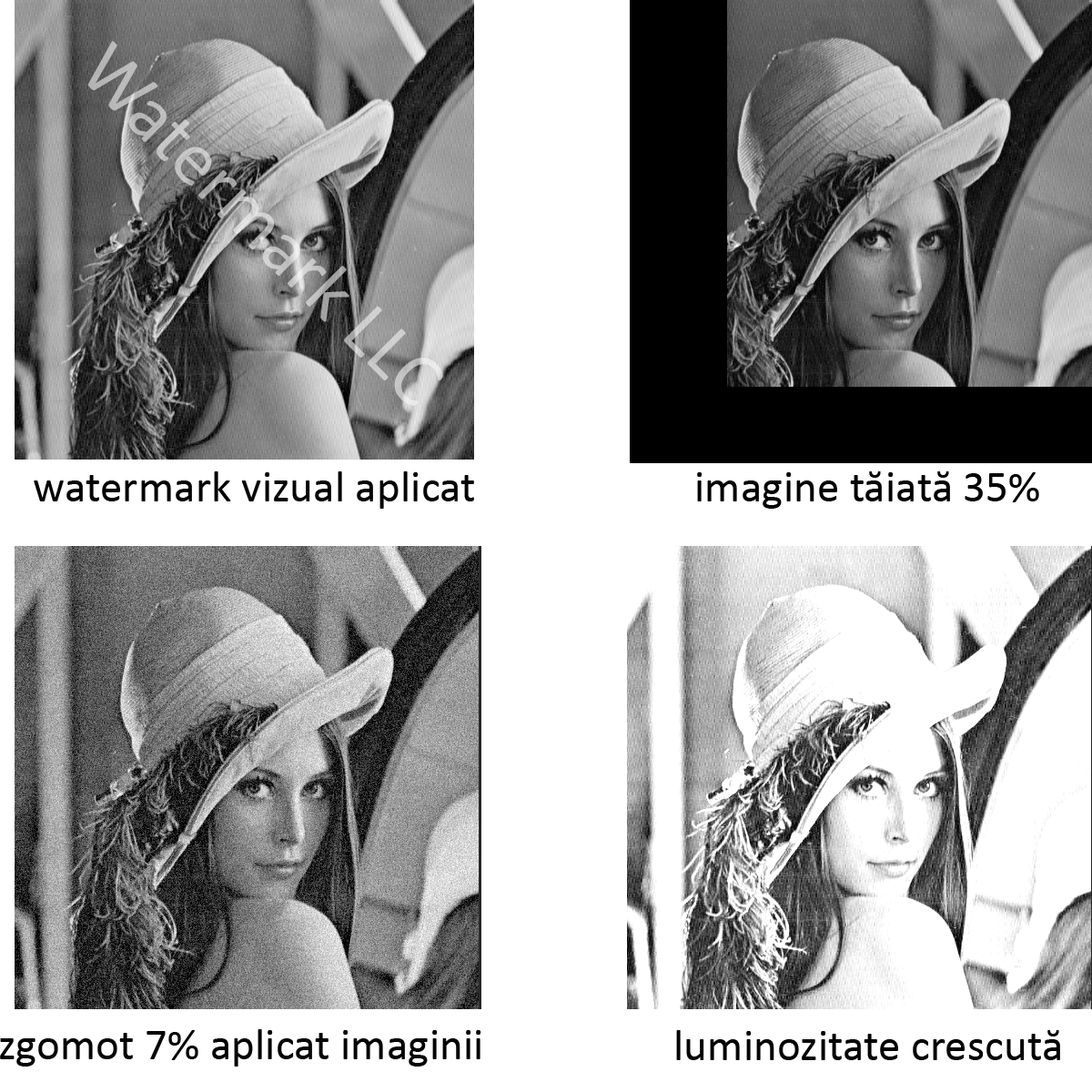
<style>
.page{position:relative;width:1092px;height:1092px;background:#ffffff}
.page>*{position:absolute;margin:0}
.t1{font:44.9px "Calibri";color:#030303}
</style>
<div class="page">
<p class="t1" style="left:34px;top:471px;width:440px;height:38px">watermark vizual aplicat</p>
<p class="t1" style="left:697px;top:471px;width:342px;height:38px">imagine tăiată 35%</p>
<p class="t1" style="left:0px;top:1029px;width:481px;height:38px">zgomot 7% aplicat imaginii</p>
<p class="t1" style="left:676px;top:1030px;width:384px;height:30px">luminozitate crescută</p>
</div>
